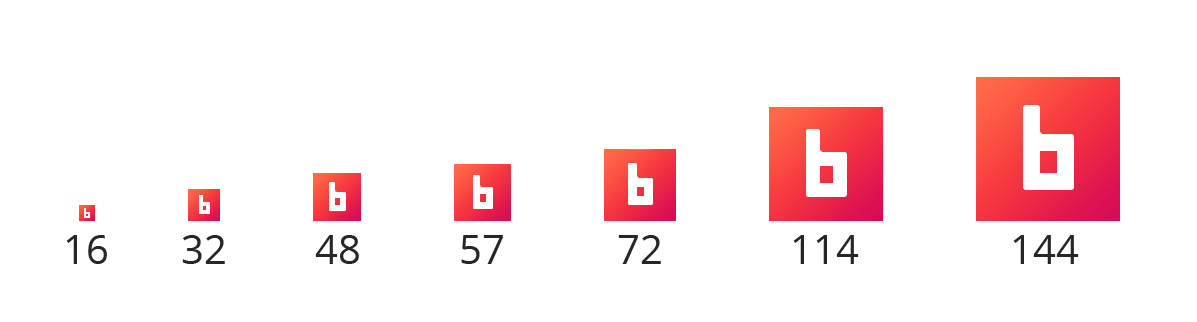
<style>
.page{position:relative;width:1197px;height:322px;background:#ffffff}
.page>*{position:absolute;margin:0}
.t1{font:40px "OpenSans";color:#262626}
</style>
<div class="page">
<p class="t1" style="left:66px;top:235px;width:41px;height:29px">16</p>
<p class="t1" style="left:182px;top:235px;width:43px;height:29px">32</p>
<p class="t1" style="left:315px;top:235px;width:44px;height:29px">48</p>
<p class="t1" style="left:461px;top:235px;width:42px;height:29px">57</p>
<p class="t1" style="left:618px;top:235px;width:43px;height:29px">72</p>
<p class="t1" style="left:793px;top:235px;width:66px;height:29px">114</p>
<p class="t1" style="left:1013px;top:235px;width:66px;height:29px">144</p>
</div>
